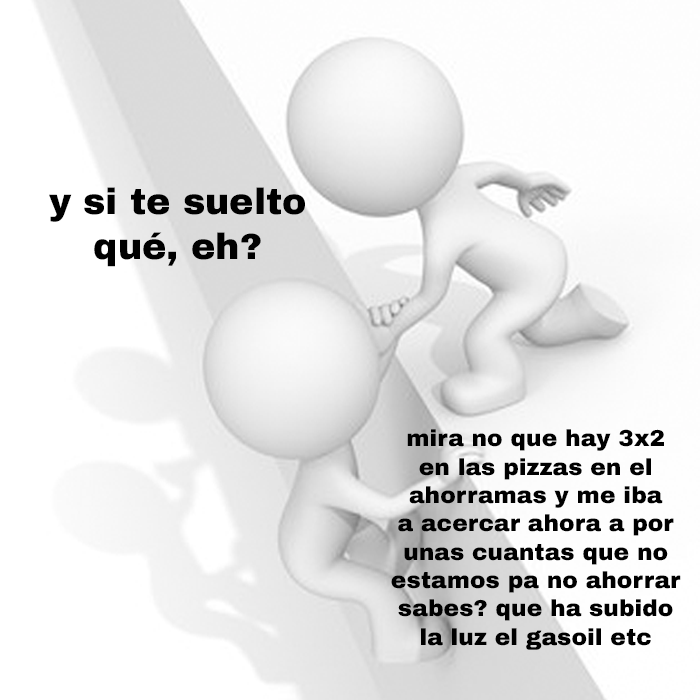
<style>
.page{position:relative;width:700px;height:700px}
.page>*{position:absolute;margin:0}
.t1{font:36.6px "ArchivoBlack-Regular";color:#000000}
.t2{font:23.4px "ArchivoBlack-Regular";color:#000000}
</style>
<div class="page">
<p class="t1" style="left:49px;top:187px;width:256px;height:80px;text-align:center">y si te suelto<br>qué, eh?</p>
<p class="t2" style="left:391px;top:429px;width:290px;height:221px;text-align:center">mira no que hay 3x2<br>en las pizzas en el<br>ahorramas y me iba<br>a acercar ahora a por<br>unas cuantas que no<br>estamos pa no ahorrar<br>sabes? que ha subido<br>la luz el gasoil etc</p>
</div>
